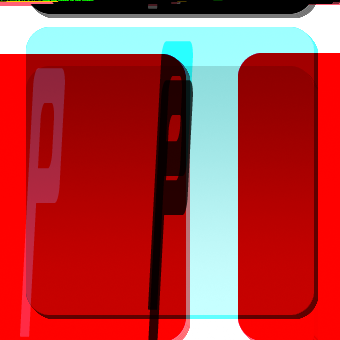
<style>
.page{position:relative;width:340px;height:340px}
.page>*{position:absolute;margin:0}
.t1{font:400px "SFLaundromaticCondensed-Oblique";font-weight:bold;scale:0.25 1}
</style>
<div class="page">
<p class="t1" style="left:148px;top:40px;width:45px;height:269px">P</p>
</div>
